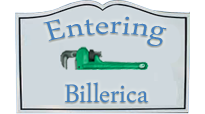
<style>
.page{position:relative;width:205px;height:114px;background:#cfd8dd}
.page>*{position:absolute;margin:0}
.t1{font:40px "DaunPenh";color:#457fbe;scale:1.21 1}
.t2{font:37px "DaunPenh";color:#457fbe}
</style>
<div class="page">
<p class="t1" style="left:43px;top:16px;width:124px;height:30px;rotate:2deg">Entering</p>
<p class="t2" style="left:65px;top:82px;width:84px;height:21px">Billerica</p>
</div>
